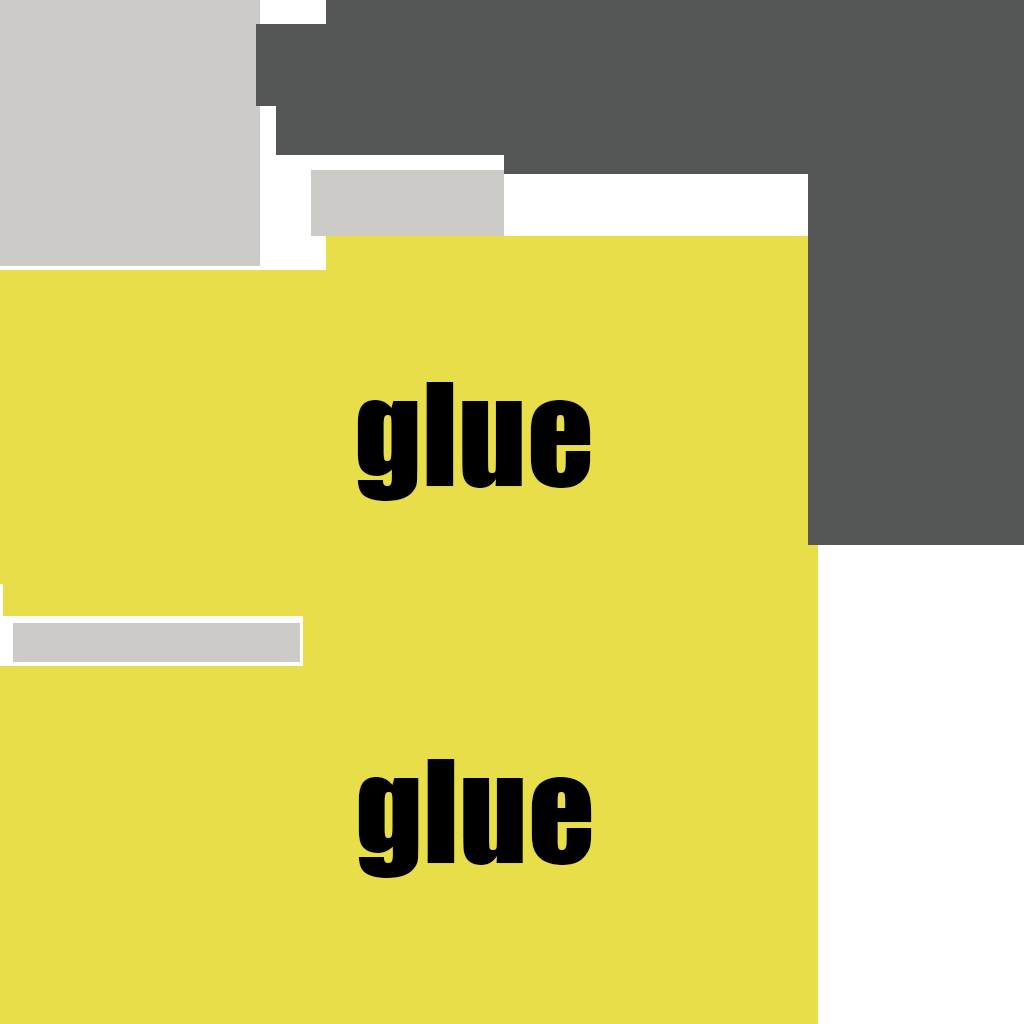
<style>
.page{position:relative;width:1024px;height:1024px;background:#e8de4a}
.page>*{position:absolute;margin:0}
.t1{font:131px "Impact";color:#000000}
</style>
<div class="page">
<p class="t1" style="left:357px;top:382px;width:234px;height:119px">glue</p>
<p class="t1" style="left:358px;top:759px;width:234px;height:119px">glue</p>
</div>
